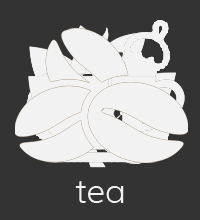
<style>
.page{position:relative;width:200px;height:220px;background:#333333}
.page>*{position:absolute;margin:0}
.t1{font:33.3px "Muli-Light";color:#f2f2f2}
</style>
<div class="page">
<p class="t1" style="left:75px;top:181px;width:49px;height:22px">tea</p>
</div>
